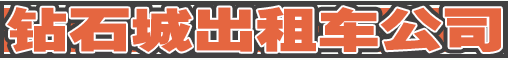
<style>
.page{position:relative;width:508px;height:60px;background:#e56640}
.page>*{position:absolute;margin:0}
.t1{font:46.5px "CloudHeiChaoGBK";color:#e56640;scale:1.34 1}
</style>
<div class="page">
<p class="t1" style="left:7px;top:7px;width:494px;height:45px">钻石城出租车公司</p>
</div>
